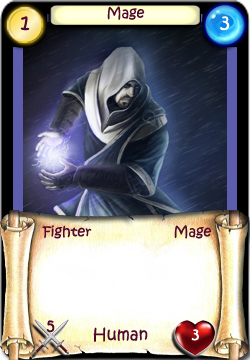
<style>
.page{position:relative;width:250px;height:360px}
.page>*{position:absolute;margin:0}
.t1{font:14px "KristenITC-Regular";color:#51092d}
.t2{font:20px "KristenITC-Regular";color:#51092d}
.t3{font:20px "KristenITC-Regular";color:#ffffff}
.t4{font:16px "KristenITC-Regular";color:#51092d}
.t5{font:16px "KristenITC-Regular";color:#fefefe}
</style>
<div class="page">
<p class="t1" style="left:107px;top:6px;width:38px;height:14px">Mage</p>
<p class="t2" style="left:20px;top:16px;width:10px;height:15px">1</p>
<p class="t3" style="left:220px;top:16px;width:10px;height:15px">3</p>
<p class="t1" style="left:42px;top:225px;width:50px;height:14px">Fighter</p>
<p class="t1" style="left:174px;top:225px;width:38px;height:14px">Mage</p>
<p class="t4" style="left:46px;top:320px;width:9px;height:13px">5</p>
<p class="t4" style="left:93px;top:327px;width:55px;height:15px">Human</p>
<p class="t5" style="left:191px;top:329px;width:8px;height:12px">3</p>
</div>
